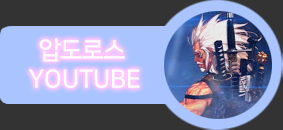
<style>
.page{position:relative;width:283px;height:130px;background:#333333}
.page>*{position:absolute;margin:0}
.t1{font:25px "NanumSquare_acB";color:#ffffff}
</style>
<div class="page">
<p class="t1" style="left:39px;top:38px;width:86px;height:24px">압도로스</p>
<p class="t1" style="left:29px;top:69px;width:111px;height:19px">YOUTUBE</p>
</div>
